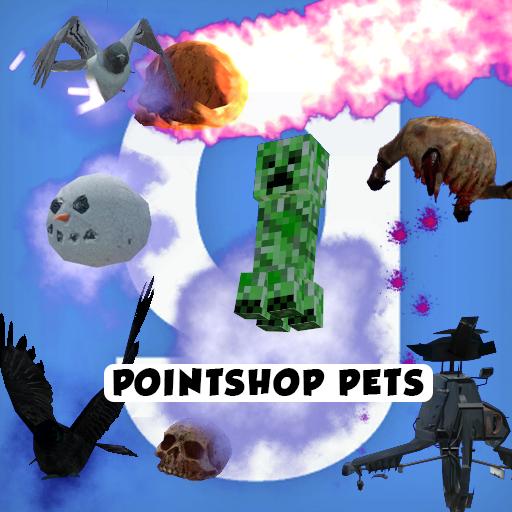
<style>
.page{position:relative;width:512px;height:512px}
.page>*{position:absolute;margin:0}
.t1{font:32px "GROBOLD";letter-spacing:0.1em;color:#000000}
</style>
<div class="page">
<p class="t1" style="left:113px;top:368px;width:311px;height:29px">POINTSHOP PETS</p>
</div>
